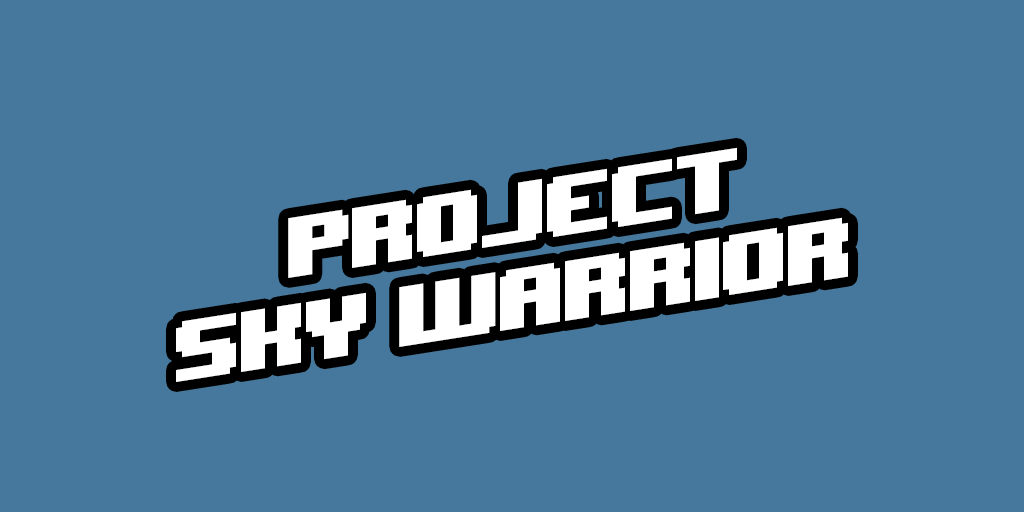
<style>
.page{position:relative;width:1024px;height:512px;background:#45789c}
.page>*{position:absolute;margin:0}
.t1{font:71.8px "8BITWONDERNominal";letter-spacing:-0.1em;color:#ffffff}
</style>
<div class="page">
<p class="t1" style="left:176px;top:147px;width:672px;height:235px;text-align:center;rotate:-9deg">Project<br>sky Warrior</p>
</div>
